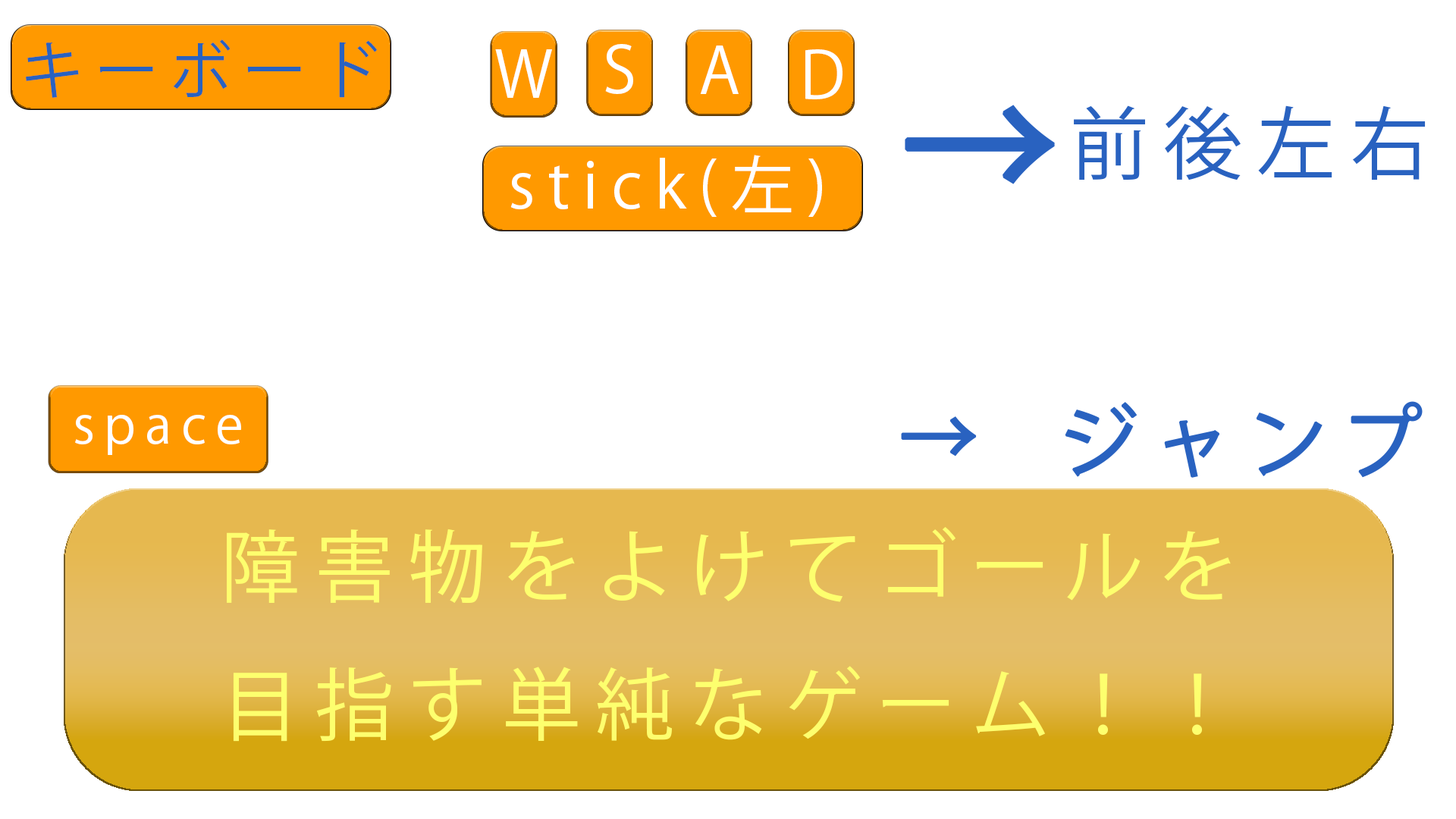
<style>
.page{position:relative;width:1456px;height:819px;background:#ffffff}
.page>*{position:absolute;margin:0}
.t1{font:63.2px "KozGoPr6N-Regular";letter-spacing:0.2em;color:#2962c0}
.t2{font:63.4px "KozGoPr6N-Regular";letter-spacing:0.2em;color:#ffffff}
.t3{font:158px "KozGoPr6N-Regular";letter-spacing:0.2em;color:#2962c0;font-weight:bold}
.t4{font:79px "KozGoPr6N-Regular";letter-spacing:0.2em;color:#2962c0}
.t5{font:79px "KozGoPr6N-Regular";letter-spacing:0.2em;color:#2962c0;font-weight:bold}
.t6{font:52.2px "KozGoPr6N-Regular";letter-spacing:0.2em;color:#ffffff}
.t7{font:79px "KozGoPr6N-Regular";letter-spacing:0.2em;color:#fdff6e}
</style>
<div class="page">
<p class="t1" style="left:26px;top:39px;width:351px;height:59px">キーボード</p>
<p class="t2" style="left:495px;top:49px;width:57px;height:49px">W</p>
<p class="t2" style="left:605px;top:44px;width:28px;height:50px">S</p>
<p class="t2" style="left:700px;top:45px;width:39px;height:49px">A</p>
<p class="t2" style="left:805px;top:49px;width:37px;height:50px">D</p>
<p class="t3" style="left:905px;top:105px;width:150px;height:79px">→</p>
<p class="t4" style="left:1074px;top:105px;width:352px;height:75px">前後左右</p>
<p class="t2" style="left:510px;top:155px;width:312px;height:62px">stick(左)</p>
<p class="t5" style="left:1065px;top:401px;width:358px;height:77px">ジャンプ</p>
<p class="t6" style="left:75px;top:415px;width:166px;height:40px">space</p>
<p class="t5" style="left:901px;top:416px;width:76px;height:41px">→</p>
<p class="t7" style="left:227px;top:526px;width:1004px;height:216px;text-align:center">障害物をよけてゴールを<br>目指す単純なゲーム！！</p>
</div>
